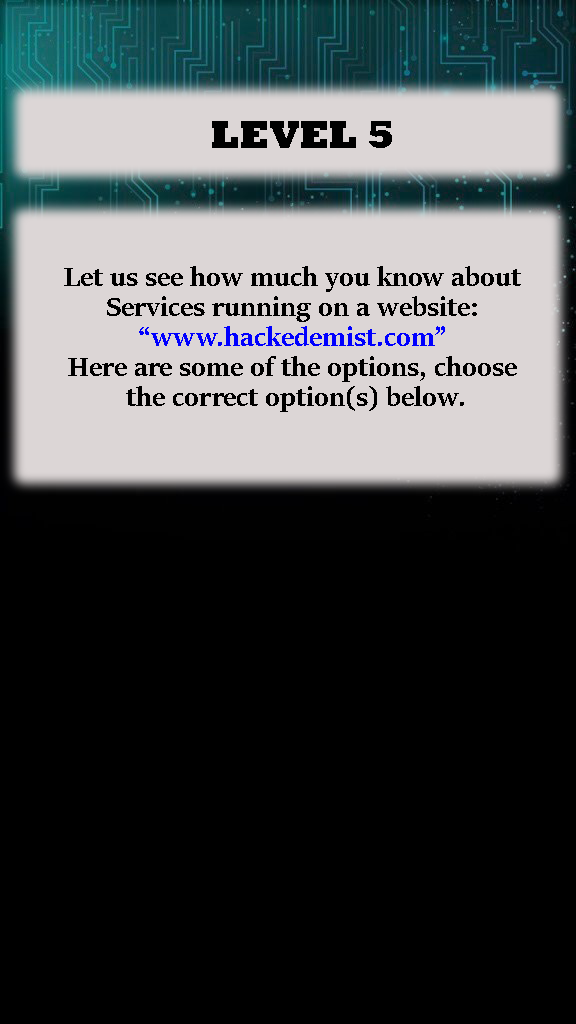
<style>
.page{position:relative;width:576px;height:1024px;background:#000000}
.page>*{position:absolute;margin:0}
.t1{font:40px "Rockwell-ExtraBold";color:#000000}
.t2{font:30px/10px "SitkaBanner-Bold";color:#000000}
.t3{font:30px/10px "SitkaBanner-Bold";color:#0000ff}
</style>
<div class="page">
<p class="t1" style="left:212px;top:121px;width:180px;height:27px">LEVEL 5</p>
<p class="t2" style="left:64px;top:266px;width:457px;height:146px;text-align:center">Let us see how much you know about <br><br><br>Services running on a website:<br><br><br><span class="t3">“www.hackedemist.com” <br><br><br></span>Here are some of the options, choose<br><br><br> the correct option(s) below.</p>
</div>
